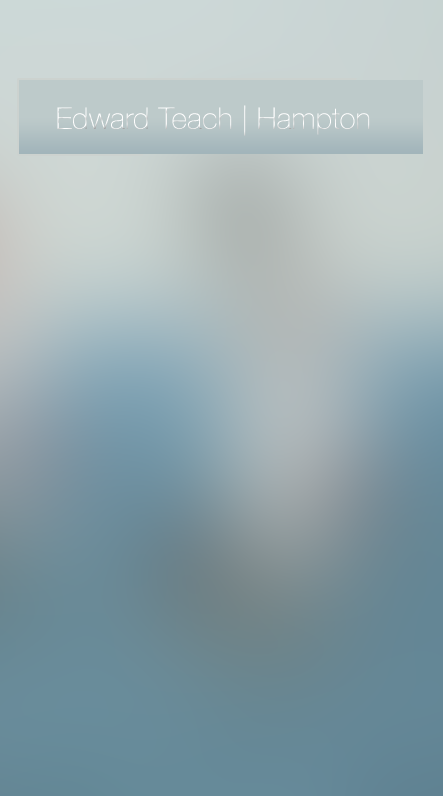
<style>
.page{position:relative;width:443px;height:796px}
.page>*{position:absolute;margin:0}
.t1{font:30px "HelveticaNeue-Thin";color:#ffffff}
</style>
<div class="page">
<p class="t1" style="left:57px;top:105px;width:313px;height:31px">Edward Teach | Hampton</p>
</div>
